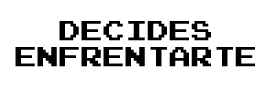
<style>
.page{position:relative;width:271px;height:89px;background:#ffffff}
.page>*{position:absolute;margin:0}
.t1{font:22px "PressStart2P";color:#000000}
</style>
<div class="page">
<p class="t1" style="left:15px;top:21px;width:240px;height:46px;text-align:center">DECIDES<br>ENFRENTARTE</p>
</div>
